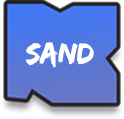
<style>
.page{position:relative;width:124px;height:119px}
.page>*{position:absolute;margin:0}
.t1{font:30px "EdoSZ";color:#ffffff}
</style>
<div class="page">
<p class="t1" style="left:26px;top:42px;width:68px;height:26px">sand</p>
</div>
